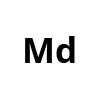
<style>
.page{position:relative;width:100px;height:100px;background:#ffffff}
.page>*{position:absolute;margin:0}
.t1{font:35px "OpenSans-Bold";color:#000000}
</style>
<div class="page">
<p class="t1" style="left:25px;top:36px;width:50px;height:27px">Md</p>
</div>
